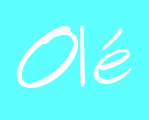
<style>
.page{position:relative;width:149px;height:120px;background:#5dffff}
.page>*{position:absolute;margin:0}
.t1{font:100px "SketchFlowPrint";color:#f9fcfc}
.t2{font:72px "SketchFlowPrint";color:#f9fcfc}
</style>
<div class="page">
<p class="t1" style="left:16px;top:26px;width:62px;height:62px">O</p>
<p class="t2" style="left:80px;top:25px;width:52px;height:62px">lé</p>
</div>
